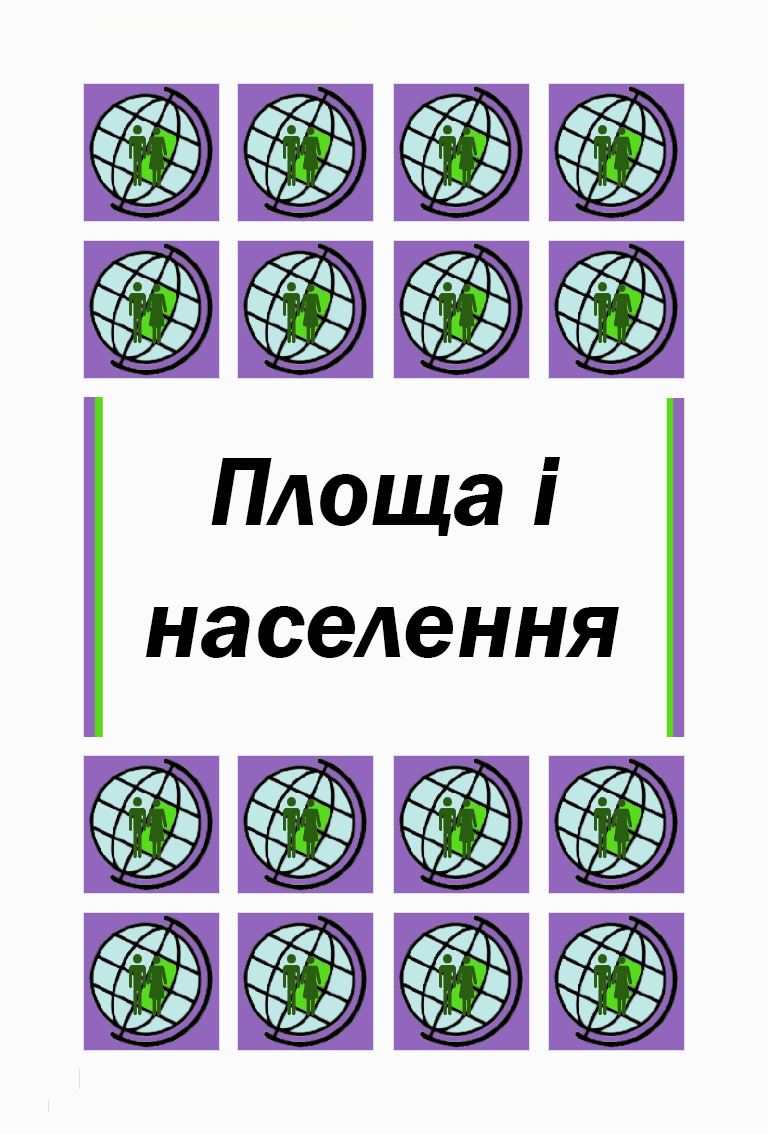
<style>
.page{position:relative;width:768px;height:1134px;background:#fbfbfb}
.page>*{position:absolute;margin:0}
.t1{font:100px "FranklinGothic-DemiItalic";color:#020000}
</style>
<div class="page">
<p class="t1" style="left:211px;top:457px;width:350px;height:79px">Площа і</p>
<p class="t1" style="left:145px;top:606px;width:474px;height:52px">населення</p>
</div>
